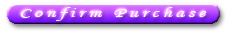
<style>
.page{position:relative;width:230px;height:32px}
.page>*{position:absolute;margin:0}
.t1{font:14px "MonotypeCorsiva";letter-spacing:0.175em;color:#ffffff;scale:1.5 1}
</style>
<div class="page">
<p class="t1" style="left:20px;top:7px;width:186px;height:14px">Confirm Purchase</p>
</div>
